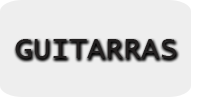
<style>
.page{position:relative;width:200px;height:100px;background:#eeeeee}
.page>*{position:absolute;margin:0}
.t1{font:30px "LucidaConsole";color:#232020}
</style>
<div class="page">
<p class="t1" style="left:15px;top:39px;width:161px;height:19px">GUITARRAS</p>
</div>
